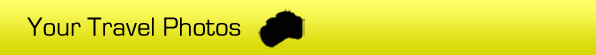
<style>
.page{position:relative;width:596px;height:55px}
.page>*{position:absolute;margin:0}
.t1{font:27.5px "EurostileRegular";color:#020202}
</style>
<div class="page">
<p class="t1" style="left:27px;top:17px;width:214px;height:19px">Your Travel Photos</p>
</div>
